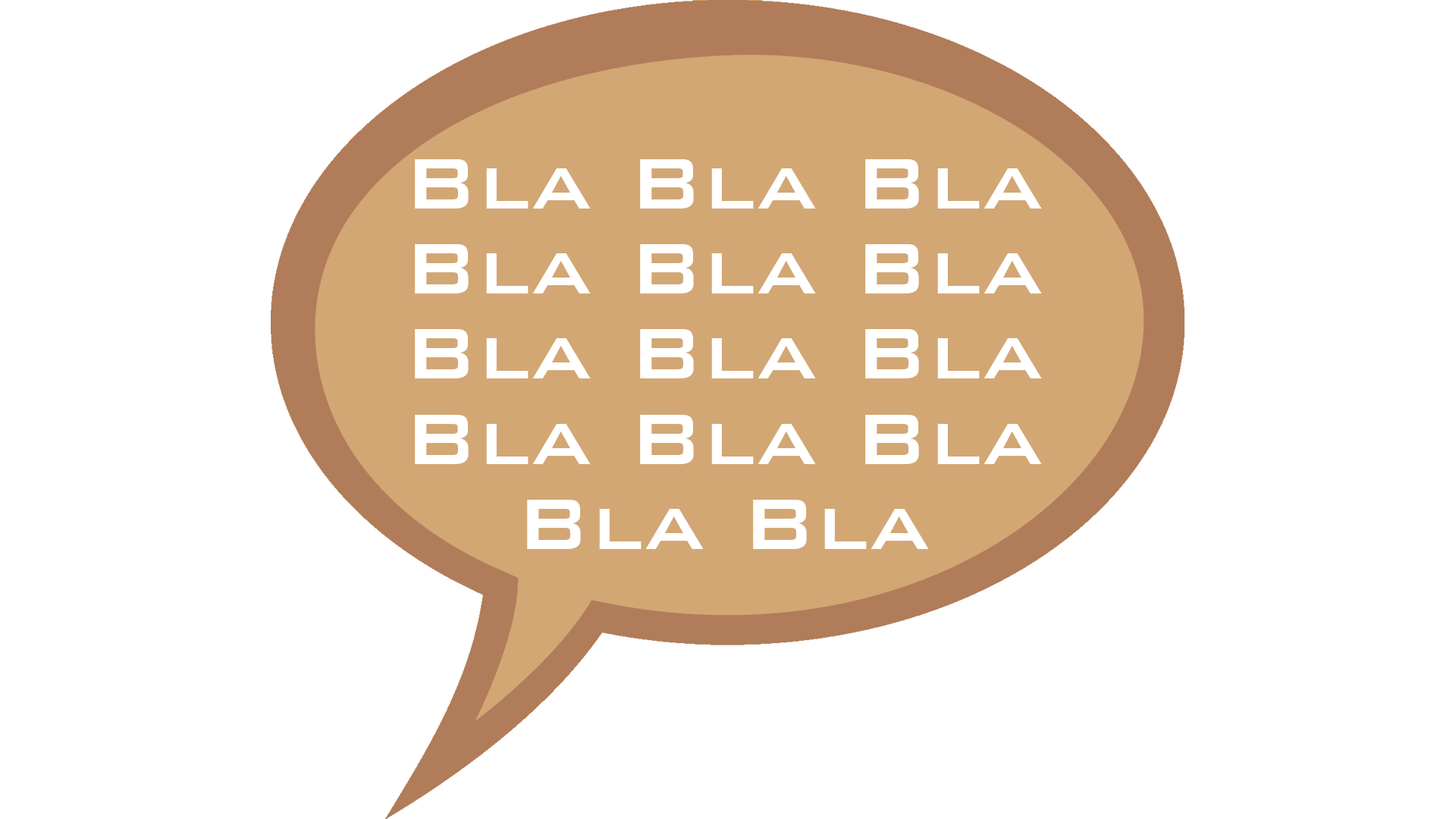
<style>
.page{position:relative;width:1456px;height:819px;background:#ffffff}
.page>*{position:absolute;margin:0}
.t1{font:94.8px/85.3px "BankGothicBT-Medium";color:#ffffff}
</style>
<div class="page">
<p class="t1" style="left:415px;top:159px;width:627px;height:390px;text-align:center">Bla Bla Bla<br>Bla Bla Bla<br>Bla Bla Bla<br>Bla Bla Bla<br>Bla Bla</p>
</div>
